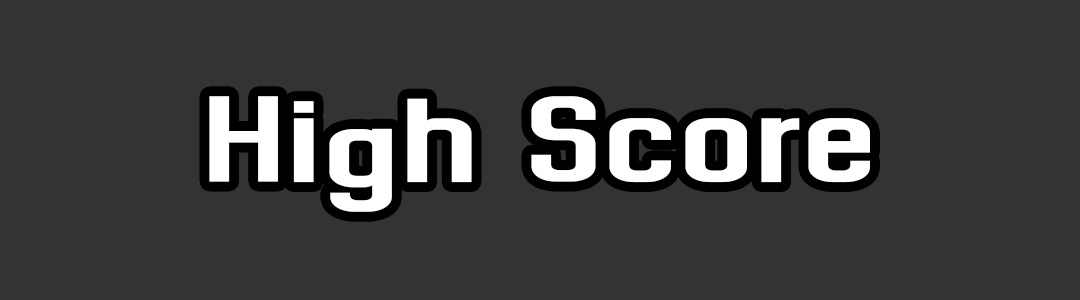
<style>
.page{position:relative;width:1080px;height:300px;background:#333333}
.page>*{position:absolute;margin:0}
.t1{font:176.9px "Dhurjati";color:#ffffff}
</style>
<div class="page">
<p class="t1" style="left:209px;top:96px;width:661px;height:116px">High Score</p>
</div>
